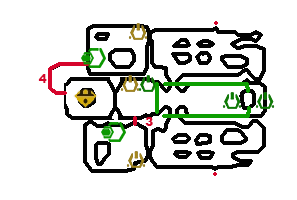
<style>
.page{position:relative;width:297px;height:200px;background:#ffffff}
.page>*{position:absolute;margin:0}
.t1{font:12px "Arial-Black";color:#d6052c}
</style>
<div class="page">
<p class="t1" style="left:38px;top:74px;width:9px;height:9px">4</p>
<p class="t1" style="left:145px;top:117px;width:8px;height:9px">3</p>
</div>
